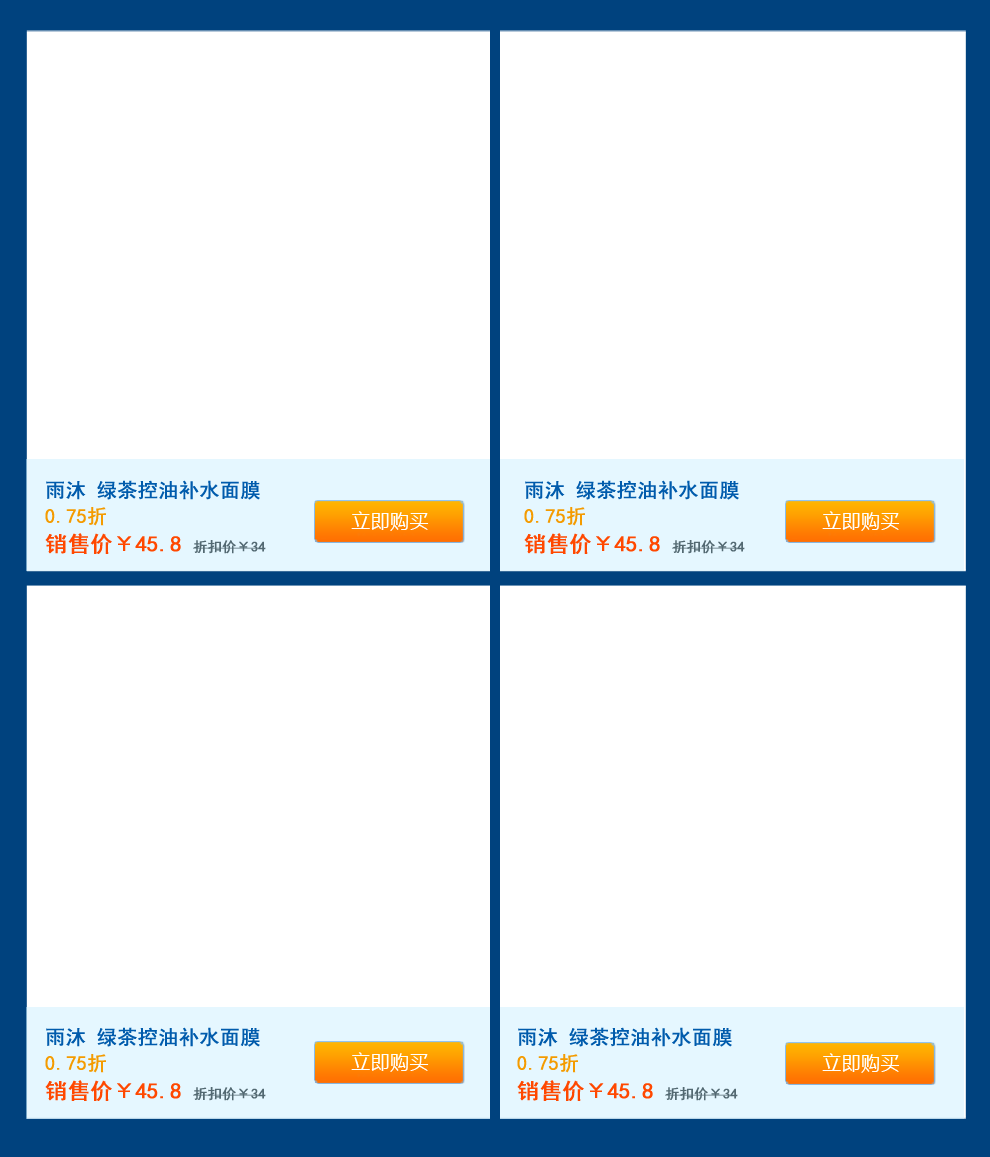
<style>
.page{position:relative;width:990px;height:1157px;background:#ffffff}
.page>*{position:absolute;margin:0}
.t1{font:20px "SimHei";color:#005bac;font-weight:bold}
.t2{font:20px "SimHei";color:#f49b00;font-weight:bold}
.t3{font:22px "SimHei";color:#ff4800;font-weight:bold}
.t4{font:14px "SimHei";color:#536972;font-weight:bold}
</style>
<div class="page">
<p class="t1" style="left:46px;top:480px;width:214px;height:20px">雨沐 绿茶控油补水面膜</p>
<p class="t1" style="left:525px;top:480px;width:214px;height:20px">雨沐 绿茶控油补水面膜</p>
<p class="t2" style="left:45px;top:507px;width:61px;height:19px">0.75折</p>
<p class="t2" style="left:524px;top:507px;width:61px;height:19px">0.75折</p>
<p class="t3" style="left:45px;top:533px;width:221px;height:21px">销售价￥45.8 <span class="t4">折扣价￥34</span></p>
<p class="t3" style="left:524px;top:533px;width:221px;height:21px">销售价￥45.8 <span class="t4">折扣价￥34</span></p>
<p class="t1" style="left:46px;top:1027px;width:214px;height:20px">雨沐 绿茶控油补水面膜</p>
<p class="t1" style="left:518px;top:1027px;width:214px;height:20px">雨沐 绿茶控油补水面膜</p>
<p class="t2" style="left:45px;top:1054px;width:61px;height:19px">0.75折</p>
<p class="t2" style="left:517px;top:1054px;width:61px;height:19px">0.75折</p>
<p class="t3" style="left:45px;top:1080px;width:221px;height:21px">销售价￥45.8 <span class="t4">折扣价￥34</span></p>
<p class="t3" style="left:517px;top:1080px;width:221px;height:21px">销售价￥45.8 <span class="t4">折扣价￥34</span></p>
</div>
